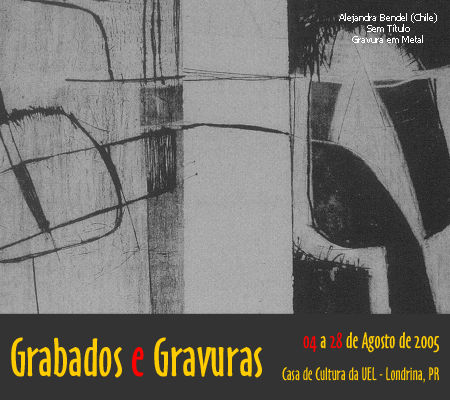
<style>
.page{position:relative;width:450px;height:400px}
.page>*{position:absolute;margin:0}
.t1{font:9px "Tahoma";color:#ffffff}
.t2{font:50px "OzHandicraftBT-Roman";color:#ffcc00}
.t3{font:50px "OzHandicraftBT-Roman";color:#ff0000}
.t4{font:20.8px "OzHandicraftBT-Roman";color:#ffcc00}
.t5{font:20.8px "OzHandicraftBT-Roman";color:#ff0000}
.t6{font:16.7px "OzHandicraftBT-Roman";color:#ffcc00}
</style>
<div class="page">
<p class="t1" style="left:339px;top:13px;width:98px;height:30px;text-align:center">Alejandra Bendel (Chile)<br>Sem Título<br>Gravura em Metal</p>
<p class="t2" style="left:11px;top:337px;width:251px;height:41px">Grabados <span class="t3">e</span> Gravuras</p>
<p class="t4" style="left:303px;top:332px;width:136px;height:21px"><span class="t5">04 </span>a <span class="t5">28</span> de Agosto de 2005</p>
<p class="t6" style="left:282px;top:367px;width:157px;height:16px">Casa de Cultura da UEL - Londrina, PR</p>
</div>
